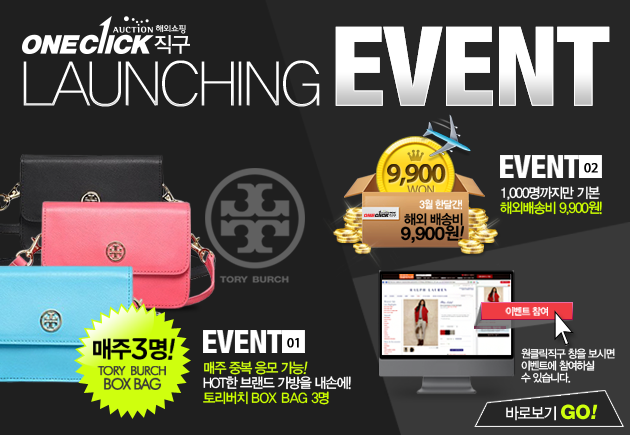
<style>
.page{position:relative;width:630px;height:435px;background:#1f1f1f}
.page>*{position:absolute;margin:0}
.t1{font:63px "YDIYGO310";letter-spacing:-0.03em;color:#ffffff;text-transform:uppercase;scale:0.95 1}
.t2{font:63px "YDIYGO310";letter-spacing:-0.23em;color:#ffffff;text-transform:uppercase;scale:0.95 1}
.t3{font:31.9px "HelveticaNeueLTStd-HvCn";letter-spacing:-0.02em;color:#ffffff;text-transform:uppercase}
.t4{font:27.2px "MyriadPro-Semibold";letter-spacing:-0.08em;font-weight:bold}
.t5{font:13.8px "Myriad-Roman";letter-spacing:-0.03em;color:#000000;text-transform:uppercase;font-weight:bold}
.t6{font:13.2px "MyriadPro-Regular";letter-spacing:-0.04em;color:#8c652a;text-transform:uppercase}
.t7{font:14px/15px "YDIYGO330";letter-spacing:-0.08em;color:#ccff00;text-transform:uppercase;scale:0.95 1}
.t8{font:14px/15px "YDIYGO330";letter-spacing:-0.08em;color:#ffffff;text-transform:uppercase;scale:0.95 1}
.t9{font:10.3px "YDIYGO350";letter-spacing:-0.08em;color:#ffffff;text-transform:uppercase;scale:0.95 1}
.t10{font:13.8px/15.1px "YDIYGO340";letter-spacing:-0.08em;color:#000000;text-transform:uppercase;scale:0.95 1}
.t11{font:18.6px/15.1px "HelveticaNeueLTStd-Bd";letter-spacing:-0.03em;color:#000000;text-transform:uppercase}
.t12{font:17.2px/15.1px "YDIYGO350";letter-spacing:-0.08em;color:#000000;text-transform:uppercase;scale:0.95 1}
.t13{font:17.2px/15.1px "YDIYGO350";letter-spacing:-0.08em;color:#000000;text-transform:uppercase;font-style:italic;scale:0.95 1}
.t14{font:10.1px "YDIYGO350";letter-spacing:-0.08em;color:#ffffff;text-transform:uppercase;scale:0.95 1}
.t15{font:24.1px "YDIYGO350";letter-spacing:-0.08em;color:#000000;text-transform:uppercase;scale:0.95 1}
.t16{font:30.2px "GothamRounded-Medium";letter-spacing:-0.03em;color:#000000;text-transform:uppercase}
.t17{font:24.1px "YDIYGO350";letter-spacing:-0.08em;color:#000000;text-transform:uppercase;font-style:italic;scale:0.95 1}
.t18{font:11px/12px "YDIYGO330";letter-spacing:-0.08em;color:#ffffff;text-transform:uppercase;scale:0.95 1}
.t19{font:12.2px/14.4px "FuturaBT-Light";letter-spacing:-0.08em;color:#383838;text-transform:uppercase;font-weight:bold}
.t20{font:15.2px/14.4px "FuturaBT-Light";letter-spacing:-0.08em;color:#383838;text-transform:uppercase;font-weight:bold}
.t21{font:14px/15px "YDIYGO330";letter-spacing:-0.08em;color:#cfff0e;text-transform:uppercase;scale:0.95 1}
.t22{font:14px/15px "YDIYGO330";letter-spacing:-0.08em;color:#cfff0e;text-transform:uppercase;font-style:italic;scale:0.95 1}
.t23{font:14px/15px "YDIYGO330";color:#ccff00;text-transform:uppercase;scale:0.95 1}
.t24{font:16px "YDIYGO330";letter-spacing:-0.08em;color:#ffffff;text-transform:uppercase;scale:0.95 1}
.t25{font:20px "HelveticaNeueLTStd-Hv";letter-spacing:-0.03em;color:#cfff0e;text-transform:uppercase}
.t26{font:20px "HelveticaNeueLTStd-Hv";letter-spacing:-0.03em;color:#cfff0e;text-transform:uppercase;font-style:italic}
</style>
<div class="page">
<p class="t1" style="left:23px;top:60px;width:297px;height:47px"><span class="t2"> </span>Launching</p>
<p class="t3" style="left:500px;top:155px;width:79px;height:23px">event</p>
<p class="t4" style="left:387px;top:164px;width:59px;height:22px">9,900</p>
<p class="t5" style="left:584px;top:163px;width:14px;height:10px">02</p>
<p class="t6" style="left:407px;top:185px;width:27px;height:10px">won</p>
<p class="t7" style="left:500px;top:186px;width:102px;height:29px"><span class="t8">1,000명까지만 기본 <br></span>해외배송비 9,900원!</p>
<p class="t9" style="left:419px;top:199px;width:43px;height:11px">3월 한달간!</p>
<p class="t10" style="left:401px;top:213px;width:63px;height:30px;text-align:right">해외 배송비<br><span class="t11">9,900</span><span class="t12">원</span><span class="t13">!</span></p>
<p class="t14" style="left:505px;top:307px;width:43px;height:9px">이벤트 참여</p>
<p class="t15" style="left:93px;top:338px;width:82px;height:22px">매주<span class="t16">3</span>명<span class="t17">!</span></p>
<p class="t3" style="left:203px;top:330px;width:79px;height:23px">event</p>
<p class="t5" style="left:287px;top:338px;width:12px;height:10px">01</p>
<p class="t18" style="left:521px;top:348px;width:94px;height:35px">원클릭직구 창을 보시면<br>이벤트에 참여하실 <br>수 있습니다.</p>
<p class="t19" style="left:97px;top:366px;width:69px;height:24px;text-align:center">Tory  Burch<br><span class="t20">BoX Bag</span></p>
<p class="t8" style="left:203px;top:361px;width:148px;height:44px"><span class="t21">매주 중복 응모 가능</span><span class="t22">!<br></span>HOT한 브랜드 가방을 내손에!<br><span class="t7">토리버치 </span><span class="t23">BOX BAG</span><span class="t7"> 3명</span></p>
<p class="t24" style="left:506px;top:404px;width:92px;height:17px">바로보기 <span class="t25">GO</span><span class="t26">!</span></p>
</div>
